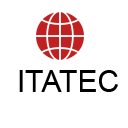
<style>
.page{position:relative;width:128px;height:128px;background:#ffffff}
.page>*{position:absolute;margin:0}
.t1{font:30px "ArialMT";color:#000000}
</style>
<div class="page">
<p class="t1" style="left:19px;top:70px;width:99px;height:22px">ITATEC</p>
</div>
